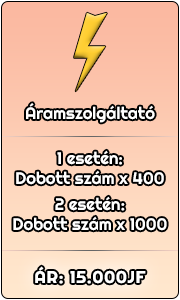
<style>
.page{position:relative;width:180px;height:300px}
.page>*{position:absolute;margin:0}
.t1{font:16.7px "Righteous-Regular";color:#ffffff}
.t2{font:16.7px "Righteous-Regular";letter-spacing:0.035em;color:#ffffff;font-weight:bold}
</style>
<div class="page">
<p class="t1" style="left:26px;top:103px;width:129px;height:20px">Áramszolgáltató</p>
<p class="t1" style="left:16px;top:150px;width:148px;height:35px;text-align:center">1 esetén:<br>Dobott szám x 400</p>
<p class="t1" style="left:13px;top:196px;width:154px;height:35px;text-align:center">2 esetén:<br>Dobott szám x 1000</p>
<p class="t2" style="left:35px;top:266px;width:111px;height:18px">ÁR: 15.000JF</p>
</div>
